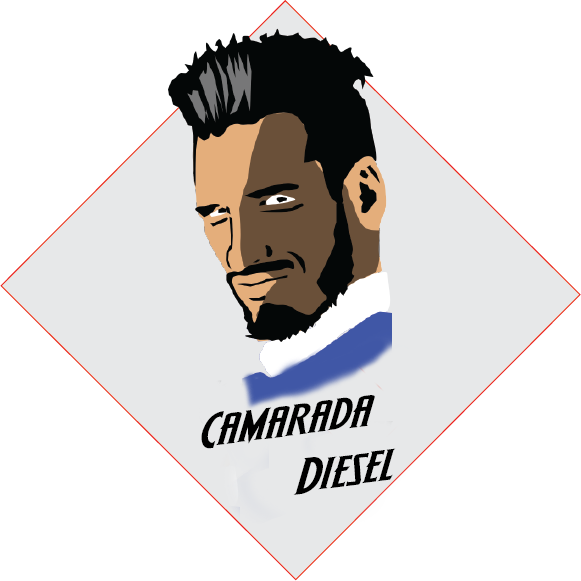
<style>
.page{position:relative;width:581px;height:581px;background:#ffffff}
.page>*{position:absolute;margin:0}
.t1{font:47.3px "Wolf'sBaneItalic";color:#000000;scale:1.5 1}
</style>
<div class="page">
<p class="t1" style="left:201px;top:395px;width:195px;height:100px;rotate:-7deg">Camarada <br> Diesel</p>
</div>
